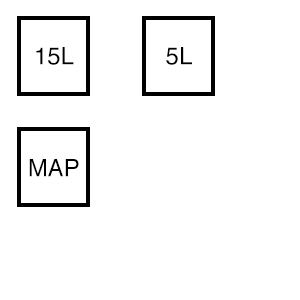
<style>
.page{position:relative;width:300px;height:300px;background:#ffffff}
.page>*{position:absolute;margin:0}
.t1{font:24px "Helvetica";color:#000000}
</style>
<div class="page">
<p class="t1" style="left:36px;top:47px;width:38px;height:18px">15L</p>
<p class="t1" style="left:166px;top:47px;width:26px;height:18px">5L</p>
<p class="t1" style="left:29px;top:159px;width:50px;height:18px">MAP</p>
</div>
